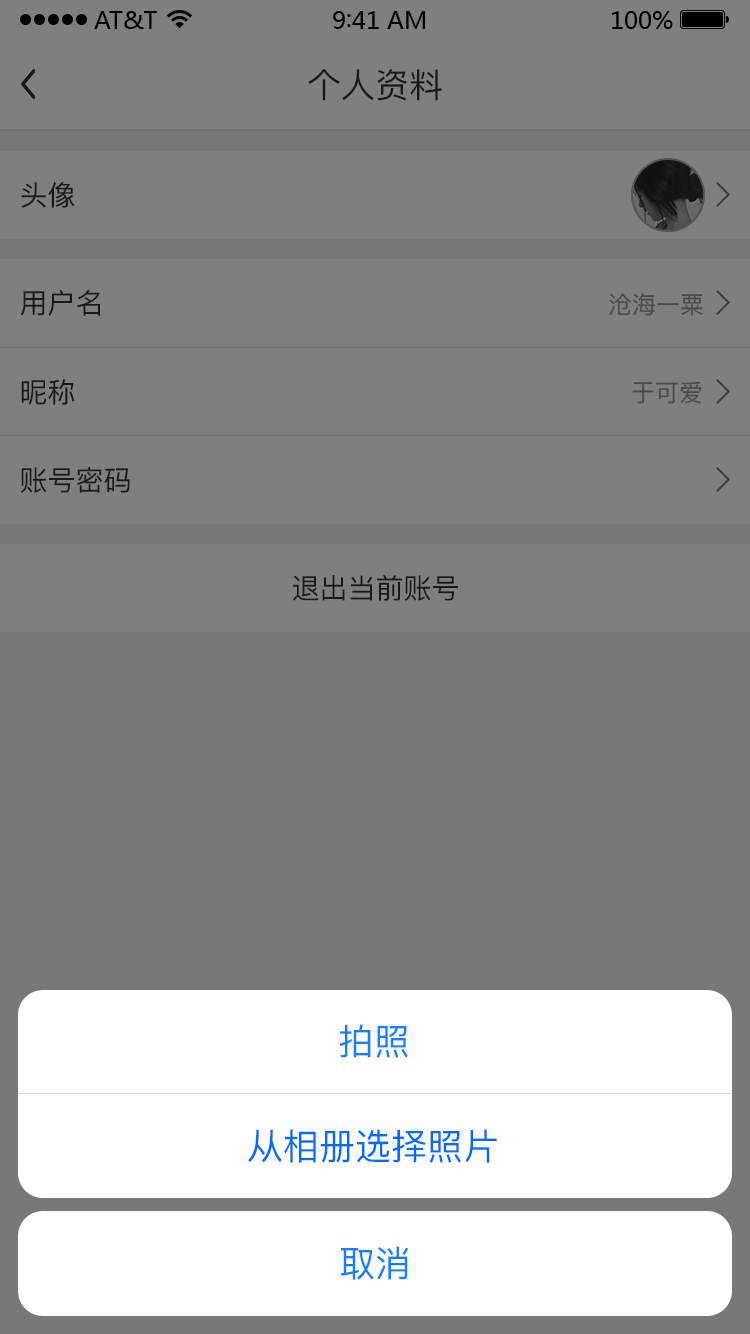
<style>
.page{position:relative;width:750px;height:1334px;background:#7f7f7f}
.page>*{position:absolute;margin:0}
.t1{font:34px "PingFang-SC-Medium";color:#191919}
.t2{font:28px "PingFang-SC-Medium";color:#191919}
.t3{font:24px "PingFang-SC-Medium";color:#494949}
.t4{font:36px "PingFang-SC-Medium";color:#177fff}
.t5{font:36px "PingFang-SC-Medium";color:#006bfe}
</style>
<div class="page">
<p class="t1" style="left:308px;top:69px;width:134px;height:32px">个人资料</p>
<p class="t2" style="left:21px;top:182px;width:54px;height:26px">头像</p>
<p class="t2" style="left:20px;top:290px;width:80px;height:26px">用户名</p>
<p class="t3" style="left:609px;top:293px;width:94px;height:23px">沧海一粟</p>
<p class="t2" style="left:21px;top:379px;width:54px;height:26px">昵称</p>
<p class="t3" style="left:632px;top:381px;width:70px;height:23px">于可爱</p>
<p class="t2" style="left:20px;top:467px;width:110px;height:26px">账号密码</p>
<p class="t2" style="left:293px;top:575px;width:165px;height:26px">退出当前账号</p>
<p class="t4" style="left:339px;top:1024px;width:69px;height:34px">拍照</p>
<p class="t5" style="left:248px;top:1129px;width:249px;height:34px">从相册选择照片</p>
<p class="t4" style="left:340px;top:1246px;width:68px;height:34px">取消</p>
</div>
